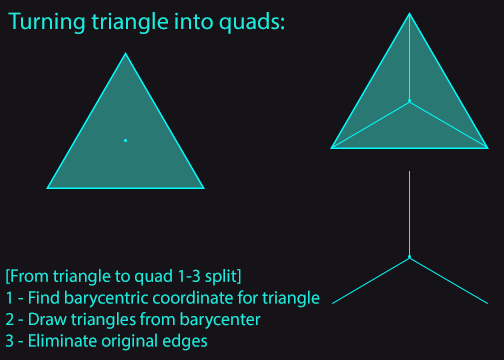
<style>
.page{position:relative;width:504px;height:360px;background:#151317}
.page>*{position:absolute;margin:0}
.t1{font:24px "MyriadPro-Regular";color:#1ee9dd}
.t2{font:18px "MyriadPro-Regular";color:#1ee9dd}
</style>
<div class="page">
<p class="t1" style="left:8px;top:12px;width:276px;height:22px">Turning triangle into quads:</p>
<p class="t2" style="left:5px;top:269px;width:315px;height:82px">[From triangle to quad 1-3 split]<br>1 - Find barycentric coordinate for triangle<br>2 - Draw triangles from barycenter<br>3 - Eliminate original edges</p>
</div>
